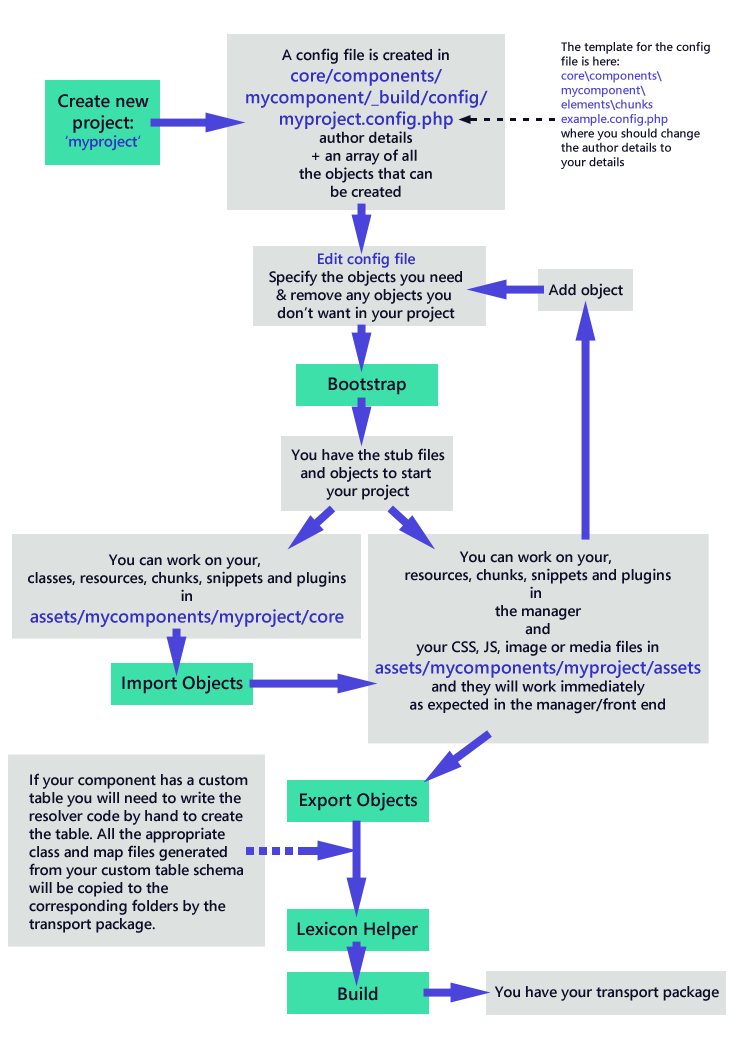
<style>
.page{position:relative;width:752px;height:1044px;background:#ffffff}
.page>*{position:absolute;margin:0}
.t1{font:15px "SegoeMediaCenter-Semibold";color:#0e0d27}
.t2{font:18px "SegoeMediaCenter-Semibold";color:#3430c3}
.t3{font:12px "SegoeMediaCenter-Semibold";color:#4b44da}
.t4{font:12px "SegoeMediaCenter-Semibold";color:#0e0d27}
.t5{font:18px "SegoeMediaCenter-Semibold";color:#0e0d27}
.t6{font:15px "SegoeMediaCenter-Semibold";color:#3430c3}
</style>
<div class="page">
<p class="t1" style="left:246px;top:48px;width:242px;height:149px;text-align:center">A config file is created in<br><span class="t2">core/components/<br>mycomponent/_build/config/<br>myproject.config.php<br></span>author details<br>+ an array of all <br>the objects that can<br>be created</p>
<p class="t3" style="left:561px;top:42px;width:149px;height:127px"><span class="t4">The template for the config <br>file is here:<br></span>core\components\<br>mycomponent\<br>elements\chunks<br>example.config.php<br><span class="t4">where you should change<br>the author details to<br>your details</span></p>
<p class="t5" style="left:58px;top:94px;width:91px;height:57px;text-align:center">Create new<br>project:<br><span class="t6">‘myproject’</span></p>
<p class="t1" style="left:269px;top:252px;width:193px;height:70px;text-align:center"><span class="t6">Edit config file<br></span>Specify the objects you need<br>&amp; remove any objects you <br>don’t want in your project</p>
<p class="t1" style="left:548px;top:283px;width:75px;height:16px">Add object</p>
<p class="t5" style="left:328px;top:377px;width:78px;height:18px">Bootstrap</p>
<p class="t1" style="left:291px;top:448px;width:154px;height:52px;text-align:center">You have the stub files<br>and objects to start <br>your project</p>
<p class="t1" style="left:28px;top:554px;width:318px;height:73px;text-align:center">You can work on your, <br>classes, resources, chunks, snippets and plugins<br>in<br><span class="t2">assets/mycomponents/myproject/core</span></p>
<p class="t1" style="left:375px;top:551px;width:326px;height:163px;text-align:center">You can work on your, <br>resources, chunks, snippets and plugins<br>in <br>the manager<br>and<br>your CSS, JS, image or media files in<br><span class="t2">assets/mycomponents/myproject/assets<br></span>and they will work immediately<br>as expected in the manager/front end</p>
<p class="t5" style="left:122px;top:675px;width:121px;height:19px">Import Objects</p>
<p class="t1" style="left:29px;top:773px;width:219px;height:160px">If your component has a custom <br>table you will need to write the<br>resolver code by hand to create <br>the table. All the appropriate <br>class and map files generated <br>from your custom table schema <br>will be copied to the <br>corresponding folders by the <br>transport package.</p>
<p class="t5" style="left:300px;top:792px;width:117px;height:19px">Export Objects</p>
<p class="t5" style="left:297px;top:921px;width:121px;height:19px">Lexicon Helper</p>
<p class="t5" style="left:338px;top:986px;width:40px;height:15px">Build</p>
<p class="t1" style="left:494px;top:986px;width:225px;height:15px">You have your transport package</p>
</div>
